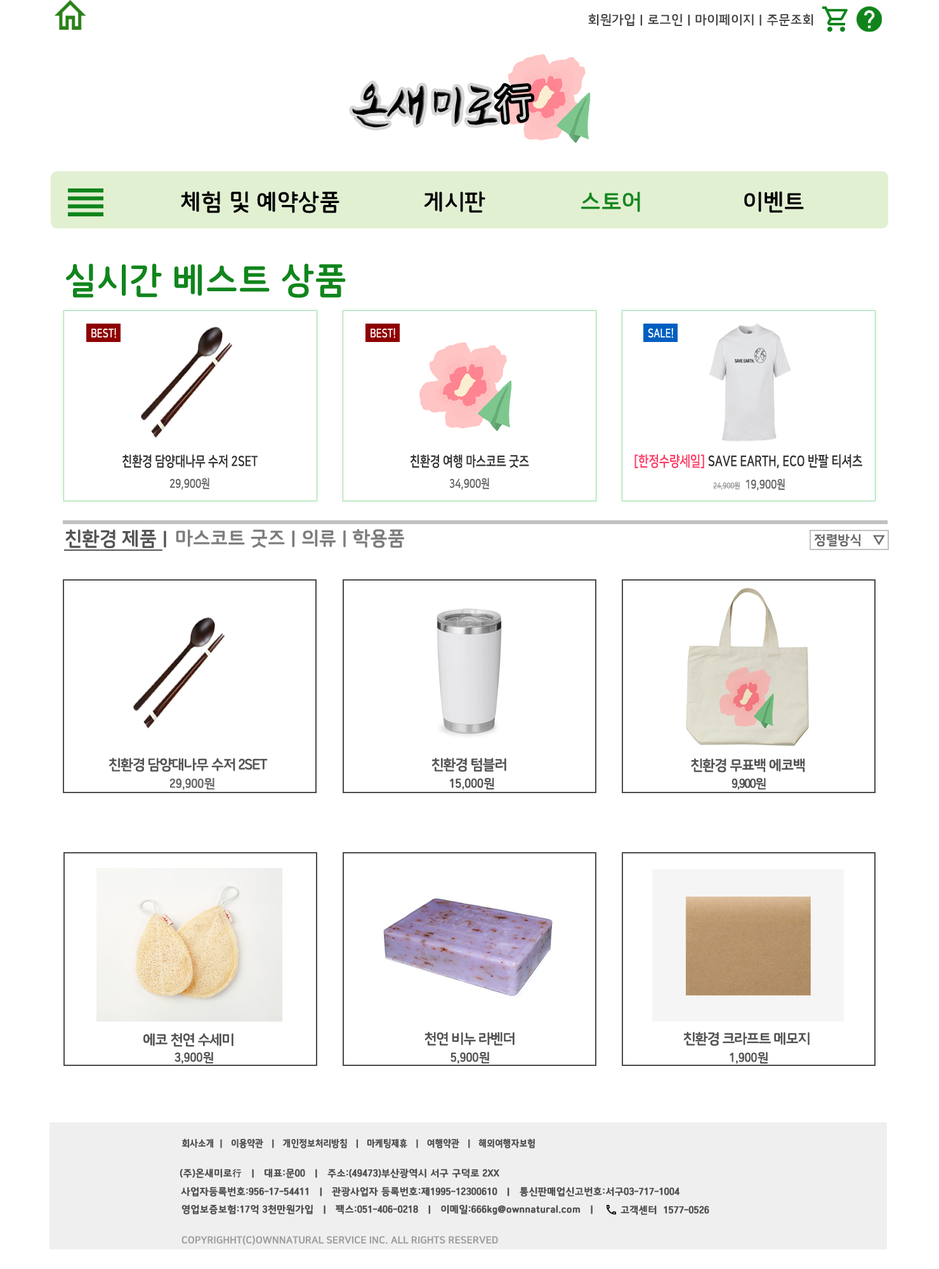
<style>
.page{position:relative;width:939px;height:1269px;background:#ffffff}
.page>*{position:absolute;margin:0}
.t1{font:12.7px "SuncheonB";color:#444343}
.t2{font:57.1px "JSArirangPPURI-Regular";color:#000000;scale:0.94 1}
.t3{font:42.5px "Gulim";color:#d6d6d6;scale:0.94 1}
.t4{font:22.2px "SuncheonB";color:#000000}
.t5{font:22.2px "SuncheonB";color:#178721}
.t6{font:34.9px "SuncheonB";color:#11851c}
.t7{font:12px "NanumSquareB";color:#ffffff;scale:0.79 1}
.t8{font:14px "NanumSquareB";color:#333333;scale:0.79 1}
.t9{font:14.4px "NanumSquareB";color:#333333;scale:0.79 1}
.t10{font:14.4px "NanumSquareB";color:#fe3c65;scale:0.79 1}
.t11{font:12px "NanumSquareB";color:#666666;scale:0.79 1}
.t12{font:8px "NanumSquareB";color:#999999;scale:0.79 1}
.t13{font:19px "SuncheonB";letter-spacing:-0.025em;color:#545654}
.t14{font:19px "SuncheonB";letter-spacing:-0.025em;color:#7c7e7c}
.t15{font:12.7px "SuncheonB";color:#676867}
.t16{font:15.1px "SuncheonB";color:#676867}
.t17{font:14px "SuncheonB";letter-spacing:-0.075em;color:#545654}
.t18{font:12.1px "SuncheonB";color:#666666}
.t19{font:12.1px "SuncheonB";color:#545654}
.t20{font:12.1px "SuncheonB";letter-spacing:-0.075em;color:#545654}
.t21{font:9.5px "SuncheonB";color:#504f4f;font-weight:bold;scale:0.88 1}
.t22{font:9.5px "SuncheonB";color:#504f4f;font-weight:bold}
.t23{font:9.5px "GulimChe";color:#504f4f;font-weight:bold}
.t24{font:9.5px "NanumSquareB";color:#9e9e9e;font-weight:bold}
</style>
<div class="page">
<p class="t1" style="left:588px;top:13px;width:226px;height:13px">회원가입 | 로그인 | 마이페이지 | 주문조회</p>
<p class="t2" style="left:352px;top:84px;width:146px;height:44px">온새미로</p>
<p class="t3" style="left:497px;top:86px;width:35px;height:36px;rotate:-5deg">行</p>
<p class="t4" style="left:181px;top:191px;width:159px;height:22px">체험 및 예약상품</p>
<p class="t4" style="left:425px;top:191px;width:61px;height:22px">게시판</p>
<p class="t5" style="left:581px;top:192px;width:59px;height:20px">스토어</p>
<p class="t4" style="left:745px;top:191px;width:59px;height:22px">이벤트</p>
<p class="t6" style="left:66px;top:263px;width:280px;height:35px">실시간 베스트 상품</p>
<p class="t7" style="left:91px;top:328px;width:25px;height:10px">BEST!</p>
<p class="t7" style="left:371px;top:328px;width:24px;height:10px">BEST!</p>
<p class="t7" style="left:648px;top:328px;width:25px;height:10px">SALE!</p>
<p class="t8" style="left:122px;top:454px;width:136px;height:14px">친환경 담양대나무 수저 2SET</p>
<p class="t8" style="left:411px;top:454px;width:118px;height:14px">친환경 여행 마스코트 굿즈</p>
<p class="t9" style="left:635px;top:454px;width:228px;height:14px"><span class="t10">[한정수량세일]</span> SAVE EARTH, ECO 반팔 티셔츠</p>
<p class="t11" style="left:170px;top:478px;width:39px;height:12px">29,900원</p>
<p class="t11" style="left:449px;top:478px;width:40px;height:12px">34,900원</p>
<p class="t12" style="left:713px;top:479px;width:72px;height:12px">24,900원<span class="t11">  19,900원</span></p>
<p class="t13" style="left:65px;top:529px;width:101px;height:19px">친환경 제품 |</p>
<p class="t14" style="left:176px;top:529px;width:229px;height:19px">마스코트 굿즈 | 의류 | 학용품</p>
<p class="t15" style="left:815px;top:534px;width:46px;height:13px">정렬방식</p>
<p class="t16" style="left:873px;top:535px;width:12px;height:11px">▽</p>
<p class="t17" style="left:109px;top:758px;width:159px;height:14px">친환경 담양대나무 수저 2SET</p>
<p class="t17" style="left:432px;top:758px;width:74px;height:14px">친환경 텀블러</p>
<p class="t17" style="left:691px;top:758px;width:114px;height:15px">친환경 무표백 에코백</p>
<p class="t18" style="left:169px;top:778px;width:46px;height:12px">29,900원</p>
<p class="t19" style="left:450px;top:778px;width:44px;height:12px">15,000원</p>
<p class="t20" style="left:732px;top:778px;width:34px;height:12px">9,900원</p>
<p class="t17" style="left:143px;top:1033px;width:91px;height:14px">에코 천연 수세미</p>
<p class="t17" style="left:425px;top:1032px;width:90px;height:14px">천연 비누 라벤더</p>
<p class="t17" style="left:684px;top:1032px;width:126px;height:15px">친환경 크라프트 메모지</p>
<p class="t19" style="left:175px;top:1052px;width:38px;height:12px">3,900원</p>
<p class="t19" style="left:451px;top:1052px;width:38px;height:12px">5,900원</p>
<p class="t19" style="left:730px;top:1052px;width:38px;height:12px">1,900원</p>
<p class="t21" style="left:182px;top:1139px;width:353px;height:10px">회사소개  |   이용약관   |   개인정보처리방침   |   마케팅제휴   |   여행약관   |   해외여행자보험</p>
<p class="t22" style="left:180px;top:1168px;width:320px;height:11px">(주)온새미로<span class="t23">行</span>   |   대표:문00   |   주소:(49473)부산광역시 서구 구덕로 2XX</p>
<p class="t22" style="left:181px;top:1187px;width:499px;height:10px">사업자등록번호:956-17-54411   |   관광사업자 등록번호:제1995-12300610   |   통신판매업신고번호:서구03-717-1004</p>
<p class="t22" style="left:182px;top:1205px;width:411px;height:10px">영업보증보험:17억 3천만원가입   |   팩스:051-406-0218   |   이메일:666kg@ownnatural.com   |</p>
<p class="t22" style="left:621px;top:1205px;width:89px;height:10px">고객센터  1577-0526</p>
<p class="t24" style="left:182px;top:1236px;width:316px;height:9px">COPYRIGHHT(C)OWNNATURAL SERVICE INC. ALL RIGHTS RESERVED</p>
</div>
